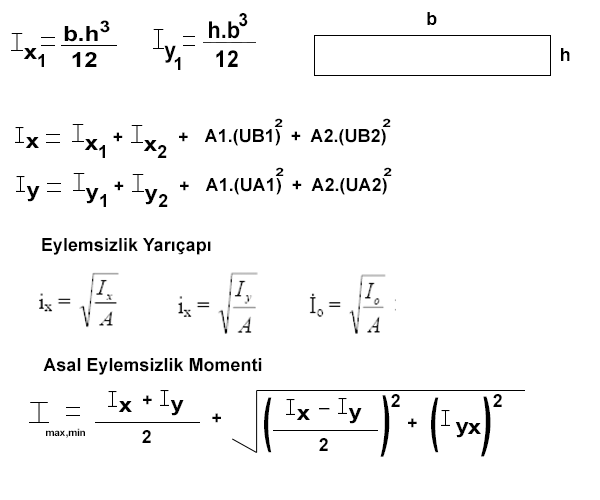
<style>
.page{position:relative;width:600px;height:500px;background:#ffffff}
.page>*{position:absolute;margin:0}
.t1{font:17.9px "Arial-BoldMT";color:#000000}
.t2{font:18px "Arial-BoldMT";color:#000000}
.t3{font:20.8px "Arial-BoldMT";color:#000000;scale:1.18 1}
.t4{font:16px "Arial-BoldMT";color:#000000;scale:1.24 1}
.t5{font:23.3px "Arial-BoldMT";color:#000000;scale:0.94 1}
.t6{font:11.5px "Arial-BoldMT";color:#000000;scale:1.41 1}
.t7{font:58.4px "Arial-BoldMT";color:#000000;scale:0.52 1}
.t8{font:65.5px "Arial-BoldMT";color:#000000;scale:0.49 1}
.t9{font:63.9px "Arial-BoldMT";color:#000000;scale:0.53 1}
.t10{font:10px "Arial-BoldMT";color:#000000}
</style>
<div class="page">
<p class="t1" style="left:239px;top:13px;width:9px;height:14px">3</p>
<p class="t2" style="left:427px;top:12px;width:10px;height:13px">b</p>
<p class="t3" style="left:64px;top:26px;width:34px;height:16px">b.h</p>
<p class="t4" style="left:100px;top:20px;width:10px;height:13px">3</p>
<p class="t5" style="left:209px;top:21px;width:31px;height:18px">h.b</p>
<p class="t3" style="left:23px;top:48px;width:14px;height:11px">x</p>
<p class="t2" style="left:38px;top:54px;width:6px;height:13px">1</p>
<p class="t3" style="left:72px;top:52px;width:25px;height:15px">12</p>
<p class="t5" style="left:164px;top:45px;width:12px;height:18px">y</p>
<p class="t5" style="left:216px;top:50px;width:22px;height:17px">12</p>
<p class="t2" style="left:561px;top:48px;width:9px;height:13px">h</p>
<p class="t2" style="left:174px;top:57px;width:7px;height:13px">1</p>
<p class="t6" style="left:274px;top:118px;width:9px;height:9px">2</p>
<p class="t6" style="left:382px;top:118px;width:9px;height:9px">2</p>
<p class="t3" style="left:25px;top:137px;width:14px;height:11px">x</p>
<p class="t2" style="left:113px;top:132px;width:10px;height:10px">+</p>
<p class="t2" style="left:179px;top:132px;width:9px;height:10px">+</p>
<p class="t2" style="left:204px;top:129px;width:182px;height:17px">A1.(UB1)  +  A2.(UB2)</p>
<p class="t3" style="left:84px;top:139px;width:14px;height:11px">x</p>
<p class="t2" style="left:99px;top:145px;width:6px;height:13px">1</p>
<p class="t3" style="left:143px;top:140px;width:14px;height:11px">x</p>
<p class="t2" style="left:157px;top:145px;width:10px;height:13px">2</p>
<p class="t6" style="left:275px;top:167px;width:9px;height:9px">2</p>
<p class="t6" style="left:383px;top:167px;width:9px;height:9px">2</p>
<p class="t2" style="left:114px;top:181px;width:10px;height:10px">+</p>
<p class="t2" style="left:180px;top:181px;width:9px;height:10px">+</p>
<p class="t2" style="left:205px;top:178px;width:182px;height:17px">A1.(UA1)  +  A2.(UA2)</p>
<p class="t3" style="left:26px;top:186px;width:14px;height:16px">y</p>
<p class="t3" style="left:85px;top:188px;width:14px;height:16px">y</p>
<p class="t2" style="left:100px;top:194px;width:6px;height:13px">1</p>
<p class="t3" style="left:144px;top:189px;width:14px;height:16px">y</p>
<p class="t2" style="left:158px;top:194px;width:10px;height:13px">2</p>
<p class="t2" style="left:42px;top:238px;width:169px;height:17px">Eylemsizlik Yarıçapı</p>
<p class="t2" style="left:43px;top:358px;width:219px;height:17px">Asal Eylemsizlik Momenti</p>
<p class="t3" style="left:118px;top:401px;width:14px;height:11px">x</p>
<p class="t2" style="left:143px;top:395px;width:9px;height:10px">+</p>
<p class="t3" style="left:170px;top:400px;width:14px;height:16px">y</p>
<p class="t7" style="left:264px;top:397px;width:8px;height:56px">(</p>
<p class="t8" style="left:380px;top:395px;width:10px;height:62px">)</p>
<p class="t2" style="left:391px;top:394px;width:9px;height:13px">2</p>
<p class="t7" style="left:431px;top:397px;width:8px;height:56px">(</p>
<p class="t9" style="left:481px;top:396px;width:10px;height:61px">)</p>
<p class="t2" style="left:493px;top:394px;width:9px;height:13px">2</p>
<p class="t2" style="left:212px;top:413px;width:9px;height:10px">+</p>
<p class="t3" style="left:296px;top:409px;width:14px;height:11px">x</p>
<p class="t2" style="left:319px;top:408px;width:11px;height:2px">_</p>
<p class="t3" style="left:348px;top:408px;width:14px;height:16px">y</p>
<p class="t2" style="left:408px;top:418px;width:9px;height:10px">+</p>
<p class="t3" style="left:455px;top:422px;width:14px;height:16px">y</p>
<p class="t3" style="left:467px;top:423px;width:14px;height:11px">x</p>
<p class="t10" style="left:46px;top:428px;width:39px;height:10px">max,min</p>
<p class="t2" style="left:142px;top:430px;width:9px;height:13px">2</p>
<p class="t2" style="left:319px;top:438px;width:9px;height:13px">2</p>
</div>
